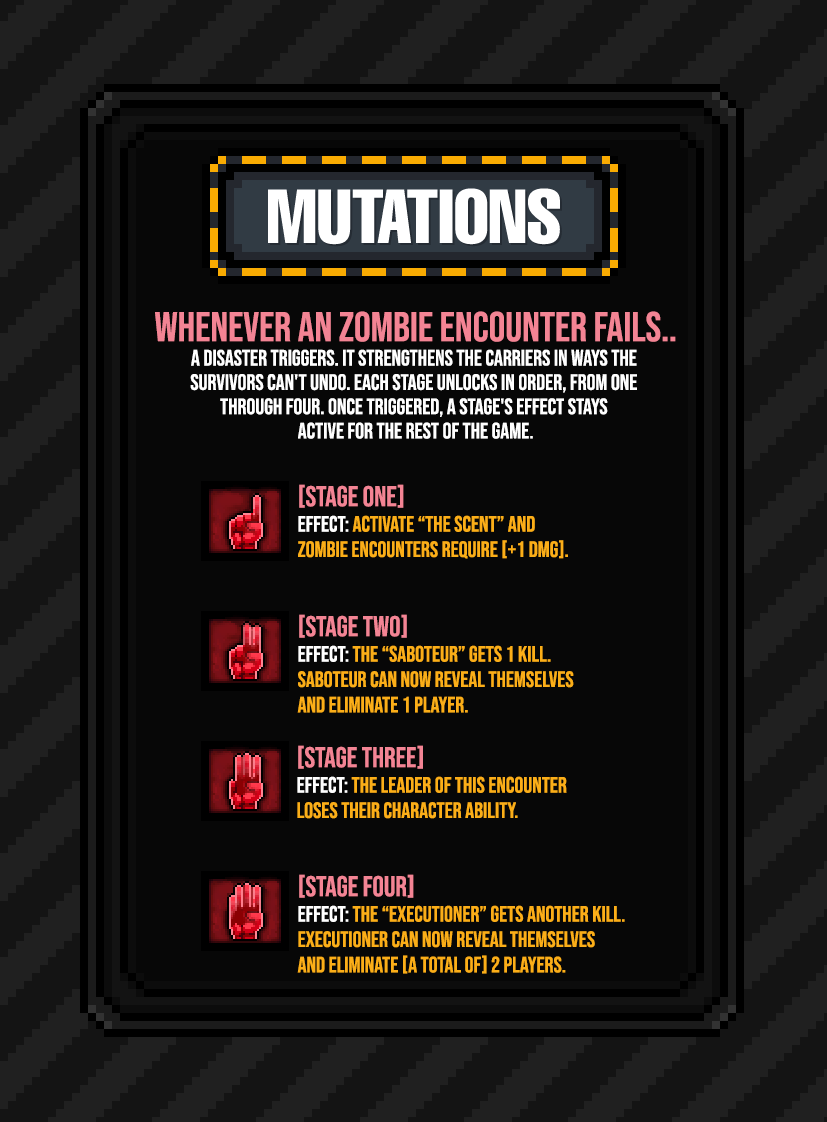
<style>
.page{position:relative;width:827px;height:1122px;background:#070707}
.page>*{position:absolute;margin:0}
.t1{font:22.2px/24.3px "BebasNeue-Regular";color:#ffffff}
.t2{font:41.7px/28.5px "BebasNeue-Regular";color:#f38494}
.t3{font:22.2px/25.4px "BebasNeue-Regular";color:#fbae18}
.t4{font:28.5px/28.5px "BebasNeue-Regular";color:#f38494}
.t5{font:22.2px/25.4px "BebasNeue-Regular";color:#ffffff}
</style>
<div class="page">
<p class="t1" style="left:155px;top:311px;width:521px;height:128px;text-align:center"><span class="t2">WHENEVER AN zombie ENCOUNTER FAILS..<br></span>A DISASTER TRIGGERS. IT STRENGTHENS THE CARRIERS IN WAYS THE <br>SURVIVORS CAN'T UNDO. EACH STAGE UNLOCKS IN ORDER, FROM ONE <br>THROUGH FOUR. ONCE TRIGGERED, A STAGE'S EFFECT STAYS <br>ACTIVE FOR THE REST OF THE GAME.</p>
<p class="t3" style="left:298px;top:484px;width:270px;height:75px"><span class="t4">[STAGE ONE]<br></span><span class="t5">EFFECT: </span>activate “THE SCENT” and<br>ZOMBIE ENCOUNTERS REQUIRE [+1 DMG].</p>
<p class="t3" style="left:297px;top:614px;width:277px;height:99px"><span class="t4">[STAGE TWO]<br></span><span class="t5">EFFECT:</span> The “SABOTEUR” gets 1 kill.<br>saboteur can now reveal themselves <br>and eliminate 1 player.</p>
<p class="t3" style="left:297px;top:745px;width:270px;height:74px"><span class="t4">[STAGE THREE]<br></span><span class="t5">EFFECT: </span>The leader of this encounter <br>loses their character ability.</p>
<p class="t3" style="left:297px;top:874px;width:328px;height:100px"><span class="t4">[STAGE FOUR]<br></span><span class="t5">EFFECT:</span> the “Executioner” gets another kill.<br>executioner can now reveal themselves<br>and eliminate [a total of] 2 players.</p>
</div>
